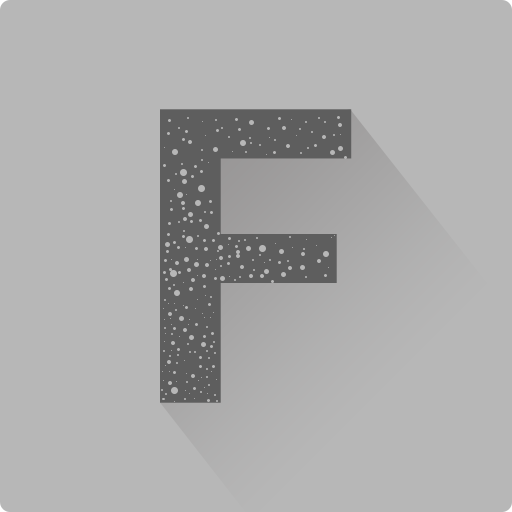
<style>
.page{position:relative;width:512px;height:512px;background:#b7b7b7}
.page>*{position:absolute;margin:0}
.t1{font:412.5px "Roboto-Bold";color:#5e5e5e;text-transform:uppercase}
</style>
<div class="page">
<p class="t1" style="left:160px;top:109px;width:192px;height:294px">F</p>
</div>
